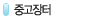
<style>
.page{position:relative;width:95px;height:20px;background:#ffffff}
.page>*{position:absolute;margin:0}
.t1{font:12px "YDIWebDotum";letter-spacing:-0.075em;color:#222222;scale:0.9 1}
</style>
<div class="page">
<p class="t1" style="left:14px;top:4px;width:37px;height:12px">중고장터</p>
</div>
